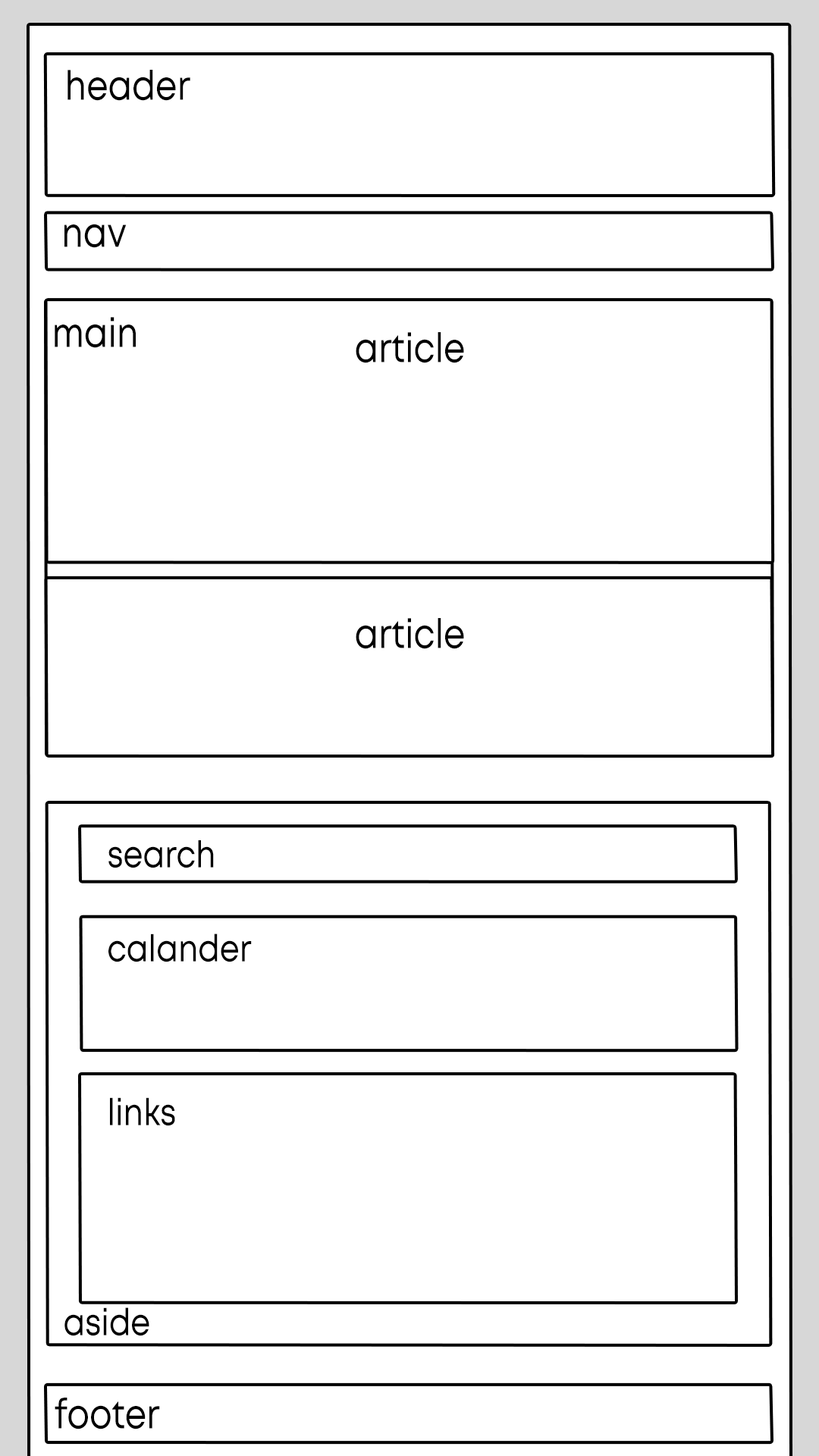
<style>
.page{position:relative;width:819px;height:1456px;background:#ffffff}
.page>*{position:absolute;margin:0}
.t1{font:40.7px "Mont-Regular";color:#000000;scale:0.84 1}
.t2{font:37.3px "Mont-Regular";color:#000000;scale:0.84 1}
</style>
<div class="page">
<p class="t1" style="left:67px;top:70px;width:123px;height:31px">header</p>
<p class="t1" style="left:64px;top:224px;width:63px;height:24px">nav</p>
<p class="t1" style="left:55px;top:317px;width:81px;height:31px">main</p>
<p class="t1" style="left:356px;top:332px;width:108px;height:31px">article</p>
<p class="t1" style="left:356px;top:618px;width:108px;height:31px">article</p>
<p class="t2" style="left:108px;top:840px;width:106px;height:28px">search</p>
<p class="t2" style="left:108px;top:933px;width:144px;height:29px">calander</p>
<p class="t2" style="left:110px;top:1097px;width:65px;height:29px">links</p>
<p class="t2" style="left:64px;top:1307px;width:85px;height:29px">aside</p>
<p class="t1" style="left:55px;top:1398px;width:105px;height:31px">footer</p>
</div>
